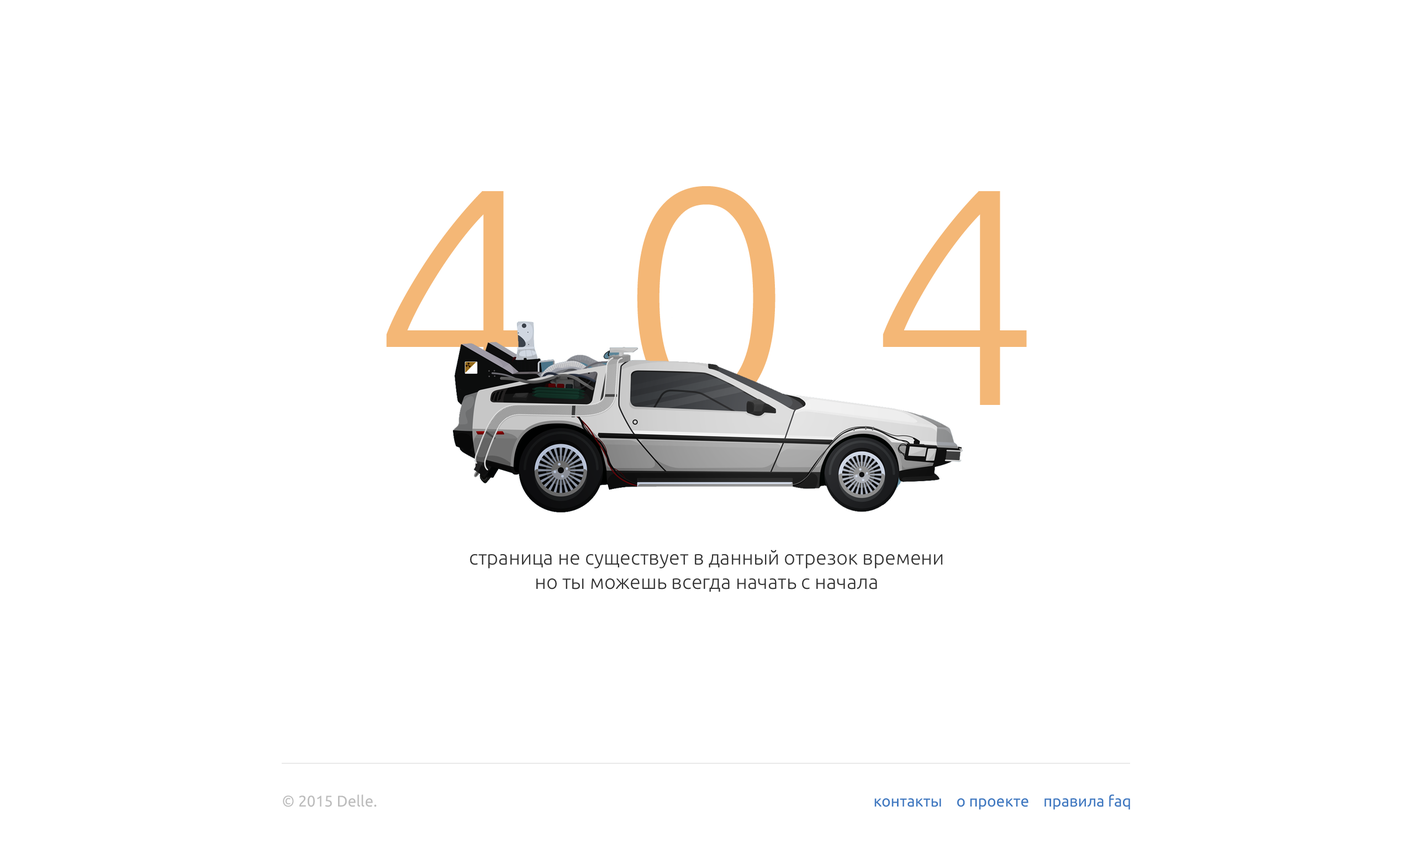
<style>
.page{position:relative;width:1414px;height:843px;background:#ffffff}
.page>*{position:absolute;margin:0}
.t1{font:308.8px "Ubuntu-Light";letter-spacing:0.24em;color:#f4b776}
.t2{font:19.9px "Ubuntu-Light";color:#333333}
.t3{font:15.4px "Ubuntu";color:#bcbcbc}
.t4{font:15.4px "Ubuntu";color:#4078c0}
</style>
<div class="page">
<p class="t1" style="left:386px;top:186px;width:641px;height:223px">404</p>
<p class="t2" style="left:470px;top:550px;width:473px;height:42px;text-align:center">страница не существует в данный отрезок времени<br>но ты можешь всегда начать с начала</p>
<p class="t3" style="left:283px;top:794px;width:94px;height:13px">© 2015 Delle.</p>
<p class="t4" style="left:875px;top:794px;width:255px;height:16px">контакты    о проекте    правила faq</p>
</div>
